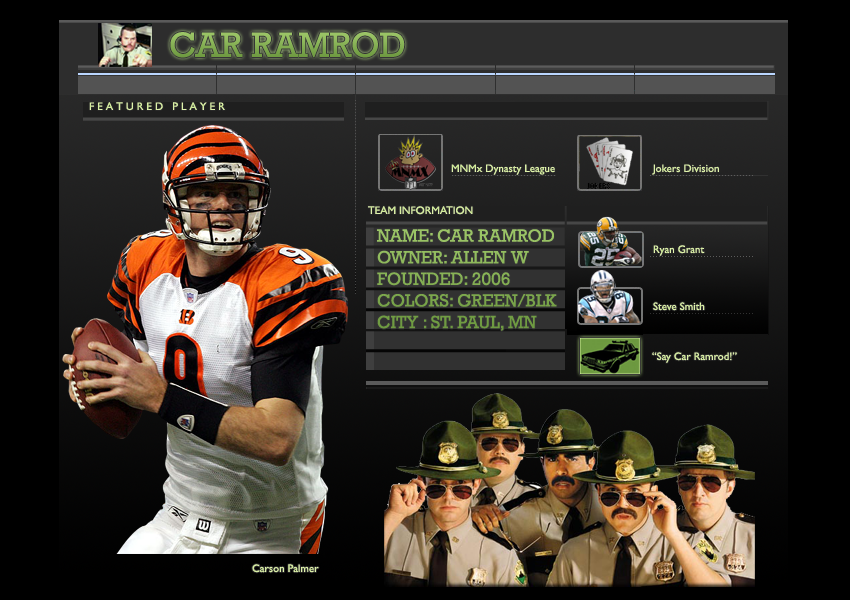
<style>
.page{position:relative;width:850px;height:600px}
.page>*{position:absolute;margin:0}
.t1{font:36px "Rockwell";color:#84af53}
.t2{font:11px "GillSansMT";color:#d9efa4}
.t3{font:11px "GillSansMT";color:#daf0a5}
.t4{font:11px "GillSansMT";color:#dcf1a8}
.t5{font:11px "GillSansMT";color:#d5eda0}
.t6{font:18px "Rockwell";color:#86b155}
.t7{font:11px "GillSansMT";color:#dcf1a7}
.t8{font:11px "GillSansMT";color:#dbf0a6}
</style>
<div class="page">
<p class="t1" style="left:170px;top:32px;width:235px;height:26px">CAR RAMROD</p>
<p class="t2" style="left:89px;top:102px;width:136px;height:9px">F E A T U R E D   P L A Y E R</p>
<p class="t3" style="left:451px;top:164px;width:104px;height:11px">MNMx Dynasty League</p>
<p class="t4" style="left:652px;top:164px;width:67px;height:11px">Jokers Division</p>
<p class="t5" style="left:368px;top:206px;width:105px;height:9px">TEAM INFORMATION</p>
<p class="t6" style="left:377px;top:229px;width:180px;height:102px">NAME: CAR RAMROD<br>OWNER: ALLEN W<br>FOUNDED: 2006<br>COLORS: GREEN/BLK<br>CITY : ST. PAUL, MN</p>
<p class="t3" style="left:653px;top:245px;width:52px;height:11px">Ryan Grant</p>
<p class="t7" style="left:653px;top:302px;width:52px;height:9px">Steve Smith</p>
<p class="t8" style="left:652px;top:352px;width:85px;height:11px">“Say Car Ramrod!”</p>
<p class="t4" style="left:252px;top:564px;width:67px;height:9px">Carson Palmer</p>
</div>
